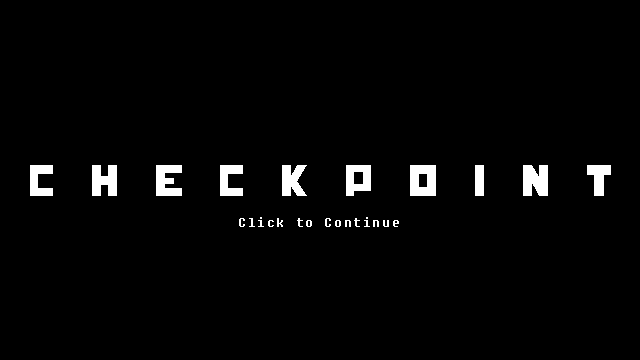
<style>
.page{position:relative;width:640px;height:360px;background:#000000}
.page>*{position:absolute;margin:0}
.t1{font:41px "HungerGames";letter-spacing:0.86em;color:#ffffff}
.t2{font:8px "Fixedsys";letter-spacing:0.2em;color:#ffffff}
</style>
<div class="page">
<p class="t1" style="left:30px;top:165px;width:581px;height:31px">Checkpoint</p>
<p class="t2" style="left:239px;top:217px;width:160px;height:10px">Click to Continue</p>
</div>
